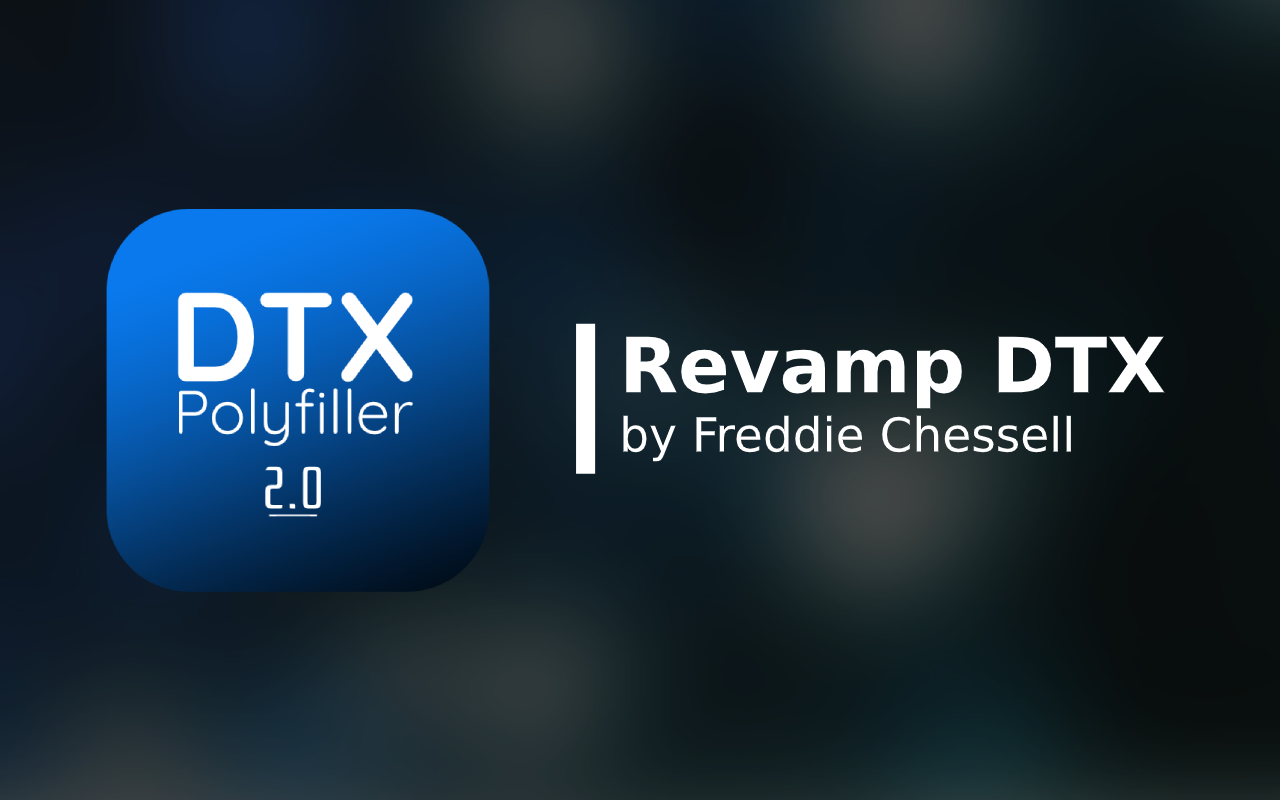
<style>
.page{position:relative;width:1280px;height:800px}
.page>*{position:absolute;margin:0}
.t1{font:76.3px "NeueHaasDisplay-Black";color:#ffffff}
.t2{font:47px "NeueHaasDisplay-Mediu";color:#ffffff}
</style>
<div class="page">
<p class="t1" style="left:626px;top:336px;width:539px;height:73px">Revamp DTX</p>
<p class="t2" style="left:623px;top:415px;width:448px;height:47px">by Freddie Chessell</p>
</div>
